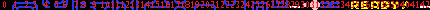
<style>
.page{position:relative;width:430px;height:10px;background:#000000}
.page>*{position:absolute;margin:0}
.t1{font:9.9px "Verdana";color:#ed1928;scale:0.81 1}
</style>
<div class="page">
<p class="t1" style="left:3px;top:1px;width:426px;height:7px">0  1  2 3  4  5 6  7 8  9 101112131415161718192021222324252627282930313233343536373839404142</p>
</div>
